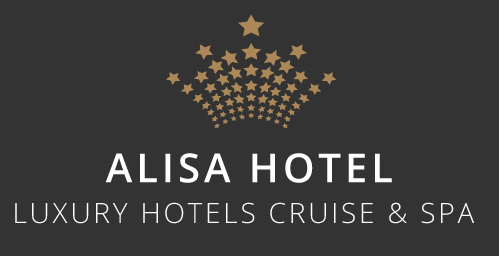
<style>
.page{position:relative;width:499px;height:256px;background:#333333}
.page>*{position:absolute;margin:0}
.t1{font:40px "OpenSans-Semibold";letter-spacing:0.1em;color:#ffffff}
.t2{font:28px "OpenSans-Light";letter-spacing:0.1em;color:#fbfbfb;text-transform:uppercase}
</style>
<div class="page">
<p class="t1" style="left:105px;top:153px;width:287px;height:30px">ALISA HOTEL</p>
<p class="t2" style="left:15px;top:202px;width:460px;height:22px">LUXURY HOTELS CRUISE &amp; SPA</p>
</div>
